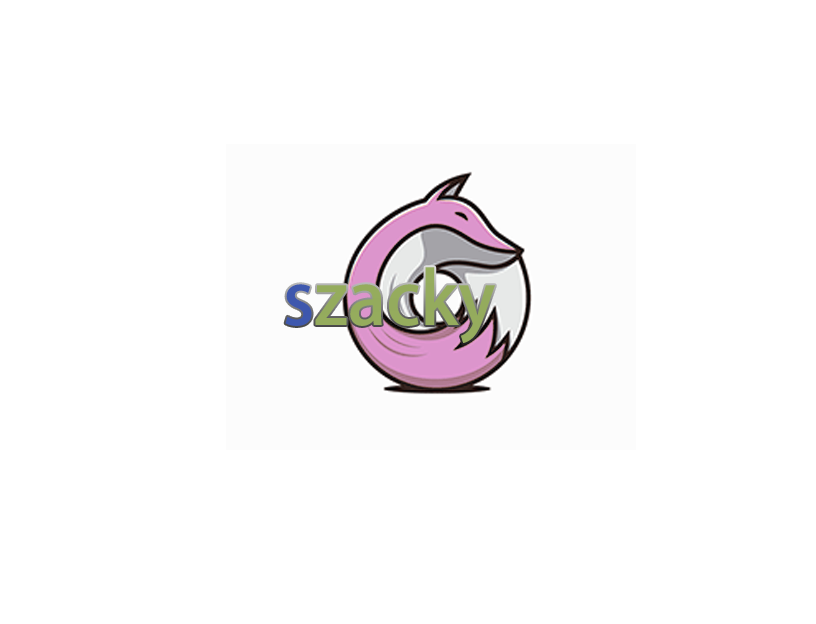
<style>
.page{position:relative;width:816px;height:624px;background:#ffffff}
.page>*{position:absolute;margin:0}
.t1{font:72px "AdobeHeitiStd-Regular";color:#95ac5d}
</style>
<div class="page">
<p class="t1" style="left:285px;top:267px;width:210px;height:76px">szacky</p>
</div>
